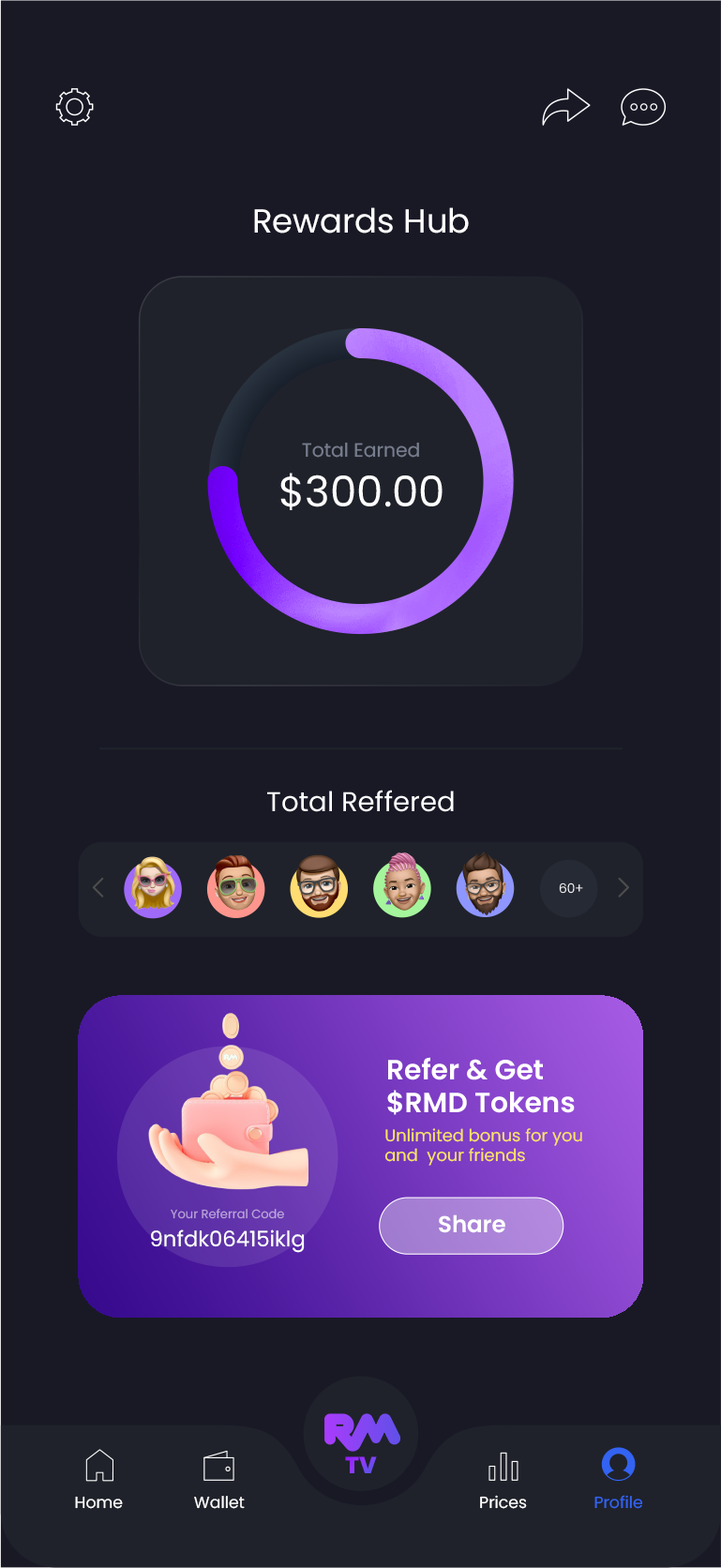
<style>
.page{position:relative;width:721px;height:1568px;background:#191926}
.page>*{position:absolute;margin:0}
.t1{font:33.2px "Poppins-Regular";color:#ffffff}
.t2{font:19.1px "Poppins-Regular";color:#777d8f}
.t3{font:42.2px "Poppins-Regular";color:#ffffff}
.t4{font:27.4px "Poppins-Regular";color:#ffffff}
.t5{font:13px "Poppins-Light"}
.t6{font:27.9px "Poppins-SemiBold";color:#ffffff}
.t7{font:16.8px "Poppins-Regular";color:#fee360}
.t8{font:12.2px "Poppins-Regular";color:#baa5da}
.t9{font:23px "Poppins-SemiBold";color:#ffffff}
.t10{font:21.3px "Poppins-Regular";color:#ffffff}
.t11{font:23.4px "Poppins-ExtraBold"}
.t12{font:16.2px "Poppins-Regular";color:#ffffff}
.t13{font:16.2px "Poppins-Regular";color:#3363f2}
</style>
<div class="page">
<p class="t1" style="left:254px;top:207px;width:215px;height:27px">Rewards Hub</p>
<p class="t2" style="left:302px;top:442px;width:117px;height:16px">Total Earned</p>
<p class="t3" style="left:280px;top:473px;width:163px;height:37px">$300.00</p>
<p class="t4" style="left:267px;top:790px;width:187px;height:22px">Total Reffered</p>
<p class="t5" style="left:559px;top:882px;width:24px;height:12px">60+</p>
<p class="t6" style="left:387px;top:1057px;width:188px;height:58px">Refer &amp; Get<br>$RMD Tokens</p>
<p class="t7" style="left:384px;top:1128px;width:198px;height:38px">Unlimited bonus for you<br>and  your friends</p>
<p class="t8" style="left:171px;top:1208px;width:113px;height:11px">Your Referral Code</p>
<p class="t9" style="left:439px;top:1214px;width:66px;height:19px">Share</p>
<p class="t10" style="left:151px;top:1229px;width:154px;height:24px">9nfdk06415iklg</p>
<p class="t11" style="left:345px;top:1456px;width:32px;height:17px">TV</p>
<p class="t12" style="left:75px;top:1496px;width:48px;height:13px">Home</p>
<p class="t12" style="left:194px;top:1496px;width:51px;height:13px">Wallet</p>
<p class="t12" style="left:480px;top:1495px;width:47px;height:14px">Prices</p>
<p class="t13" style="left:595px;top:1495px;width:48px;height:14px">Profile</p>
</div>
